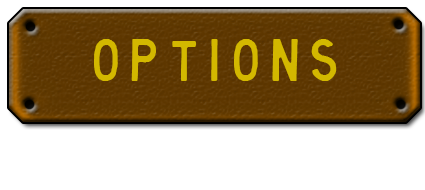
<style>
.page{position:relative;width:425px;height:190px;background:#ffffff}
.page>*{position:absolute;margin:0}
.t1{font:60px "HeavyEquipment";letter-spacing:0.17em;color:#d3b800;text-transform:uppercase}
</style>
<div class="page">
<p class="t1" style="left:94px;top:39px;width:243px;height:42px">Options</p>
</div>
